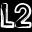
<style>
.page{position:relative;width:32px;height:32px;background:#000000}
.page>*{position:absolute;margin:0}
.t1{font:25px "BennyBlanco";color:#ffffff}
</style>
<div class="page">
<p class="t1" style="left:0px;top:3px;width:32px;height:25px">L2</p>
</div>
